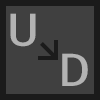
<style>
.page{position:relative;width:100px;height:100px;background:#404040}
.page>*{position:absolute;margin:0}
.t1{font:46.7px "FiraCode-Retina";letter-spacing:0.08em;color:#b4b4b4;scale:1.14 1}
</style>
<div class="page">
<p class="t1" style="left:10px;top:13px;width:26px;height:34px">U</p>
<p class="t1" style="left:62px;top:53px;width:26px;height:33px">D</p>
</div>
